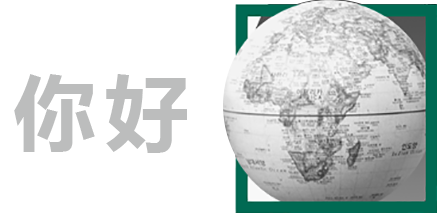
<style>
.page{position:relative;width:440px;height:220px;background:#ffffff}
.page>*{position:absolute;margin:0}
.t1{font:83px "MicrosoftYaHei-Bold";letter-spacing:0.11em;color:#bcbdbd}
</style>
<div class="page">
<p class="t1" style="left:14px;top:74px;width:173px;height:79px">你好</p>
</div>
